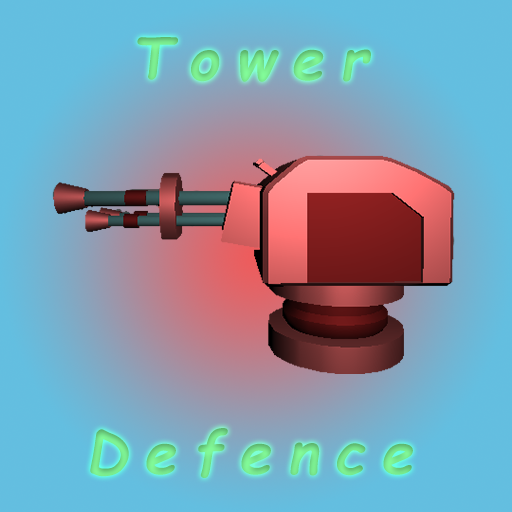
<style>
.page{position:relative;width:512px;height:512px}
.page>*{position:absolute;margin:0}
.t1{font:58.3px "ComicSansMS-BoldItalic";letter-spacing:0.28em;color:#77e68c}
.t2{font:58.3px "ComicSansMS-BoldItalic";letter-spacing:0.28em;color:#76e48b}
</style>
<div class="page">
<p class="t1" style="left:137px;top:37px;width:234px;height:45px">Tower</p>
<p class="t2" style="left:90px;top:428px;width:323px;height:50px">Defence</p>
</div>
